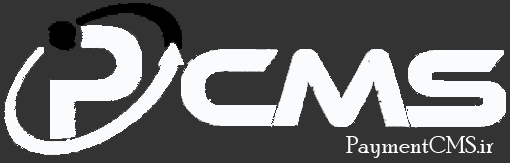
<style>
.page{position:relative;width:510px;height:163px;background:#333333}
.page>*{position:absolute;margin:0}
.t1{font:25px "PoorRichard-Regular";color:#ffffff}
</style>
<div class="page">
<p class="t1" style="left:346px;top:136px;width:148px;height:22px">PaymentCMS.ir</p>
</div>
